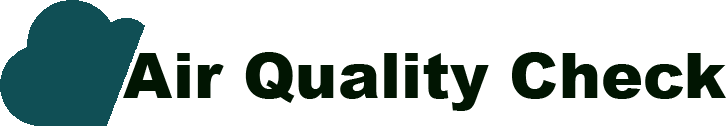
<style>
.page{position:relative;width:726px;height:126px;background:#ffffff}
.page>*{position:absolute;margin:0}
.t1{font:63.2px "Arial-Black";color:#011502}
</style>
<div class="page">
<p class="t1" style="left:123px;top:52px;width:603px;height:59px">Air Quality Check</p>
</div>
